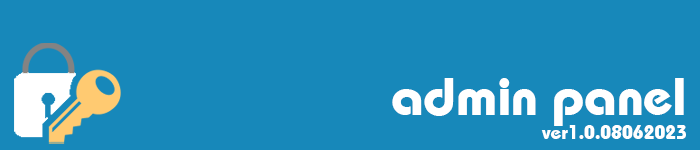
<style>
.page{position:relative;width:700px;height:150px;background:#1788ba}
.page>*{position:absolute;margin:0}
.t1{font:19.4px "BahamasBold";color:#ffffff}
.t2{font:52.8px "BahamasBold";color:#ffffff}
</style>
<div class="page">
<p class="t1" style="left:392px;top:78px;width:294px;height:61px;text-align:right"><span class="t2">admin panel<br></span>ver1.0.08062023</p>
</div>
